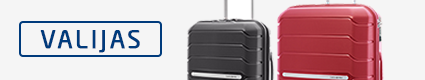
<style>
.page{position:relative;width:425px;height:80px;background:#f5f5f5}
.page>*{position:absolute;margin:0}
.t1{font:24px "NeoSansPro-Regular";letter-spacing:0.1em;color:#003b7c;font-weight:bold}
</style>
<div class="page">
<p class="t1" style="left:40px;top:30px;width:100px;height:23px">VALIJAS</p>
</div>
